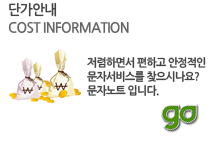
<style>
.page{position:relative;width:210px;height:143px;background:#ffffff}
.page>*{position:absolute;margin:0}
.t1{font:14px "NanumGothicBold";letter-spacing:-0.05em;color:#454545;scale:0.97 1}
.t2{font:14px "NanumGothicBold";letter-spacing:-0.05em;color:#656565;scale:0.97 1}
.t3{font:11px/14px "NanumGothicBold";letter-spacing:-0.05em;color:#454545;scale:0.97 1}
</style>
<div class="page">
<p class="t1" style="left:9px;top:2px;width:48px;height:15px">단가안내</p>
<p class="t2" style="left:8px;top:21px;width:121px;height:13px">COST INFORMATION</p>
<p class="t3" style="left:87px;top:57px;width:119px;height:39px">저렴하면서 편하고 안정적인<br>문자서비스를 찾으시나요? <br>문자노트 입니다.</p>
</div>
